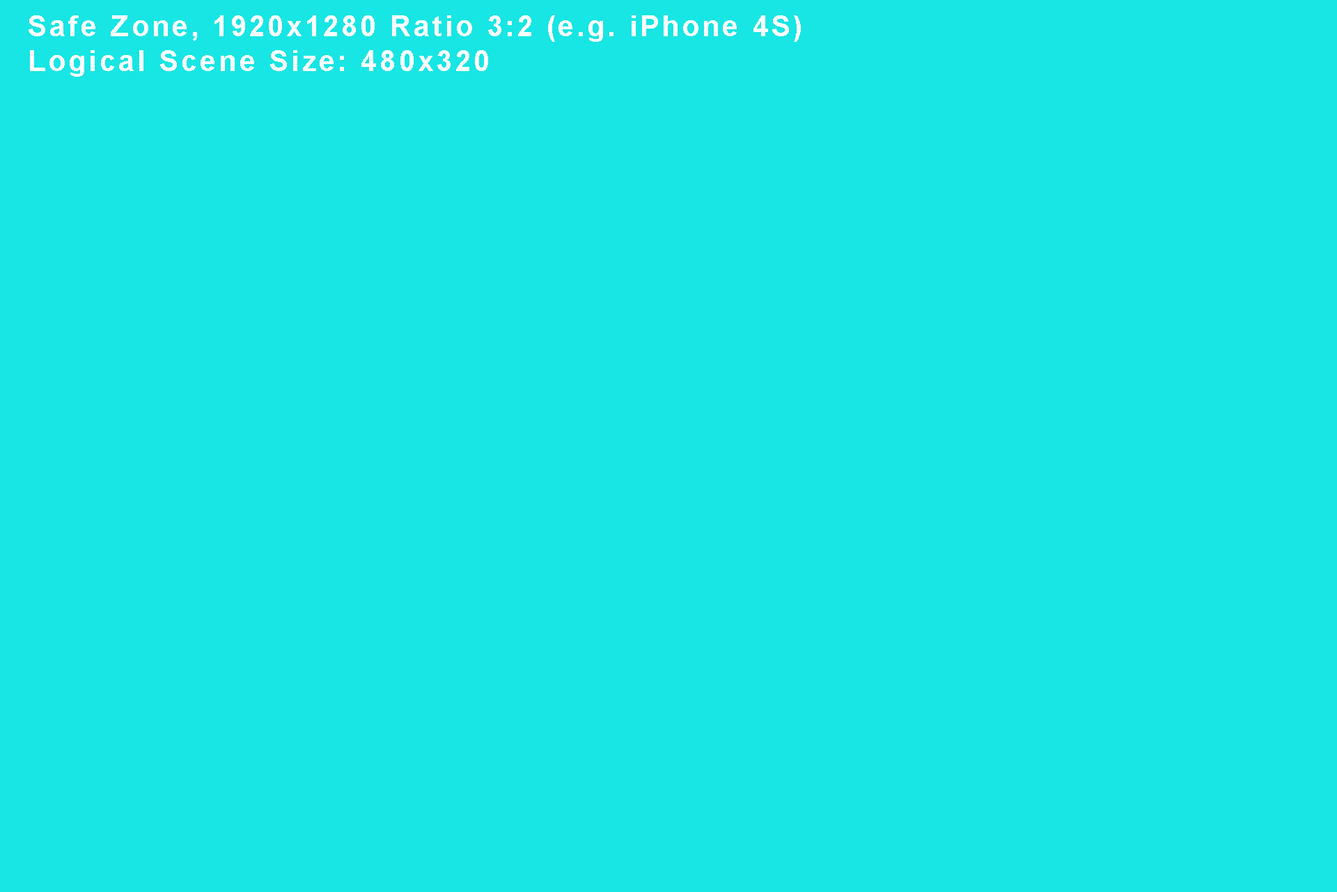
<style>
.page{position:relative;width:1337px;height:892px;background:#17e6e4}
.page>*{position:absolute;margin:0}
.t1{font:29px "Arial-BoldMT";letter-spacing:0.1em;color:#ffffff}
</style>
<div class="page">
<p class="t1" style="left:29px;top:15px;width:772px;height:62px">Safe Zone, 1920x1280 Ratio 3:2 (e.g. iPhone 4S)<br>Logical Scene Size: 480x320</p>
</div>
